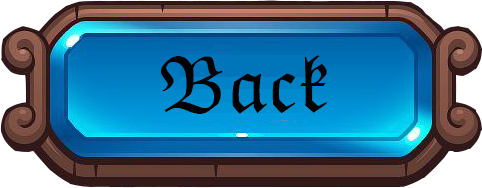
<style>
.page{position:relative;width:482px;height:188px}
.page>*{position:absolute;margin:0}
.t1{font:80px "EuclidFraktur";color:#000000}
</style>
<div class="page">
<p class="t1" style="left:160px;top:55px;width:167px;height:59px">Back</p>
</div>
